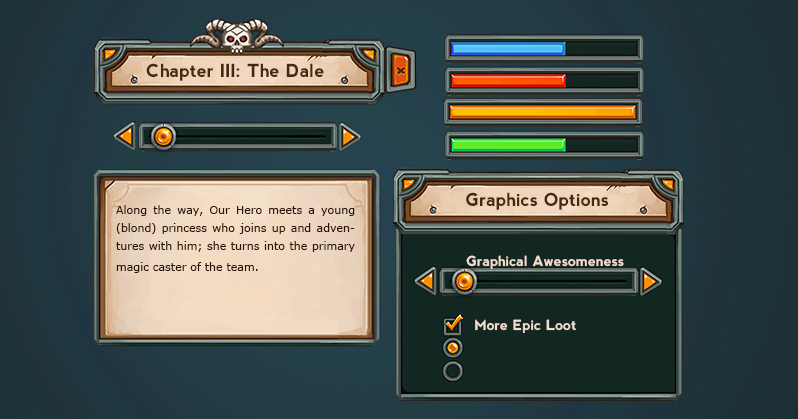
<style>
.page{position:relative;width:798px;height:419px}
.page>*{position:absolute;margin:0}
.t1{font:18px "nevis-Bold";color:#492811}
.t2{font:11px/18px "Verdana";color:#271406}
.t3{font:14px "nevis-Bold";color:#f2ddcc}
</style>
<div class="page">
<p class="t1" style="left:146px;top:63px;width:178px;height:18px">Chapter III: The Dale</p>
<p class="t1" style="left:466px;top:192px;width:142px;height:18px">Graphics Options</p>
<p class="t2" style="left:116px;top:205px;width:239px;height:68px;text-align:justify">Along the way, Our Hero meets a young (blond) princess who joins up and adventures with him; she turns into the primary magic caster of the team.</p>
<p class="t3" style="left:466px;top:255px;width:158px;height:14px">Graphical Awesomeness</p>
<p class="t3" style="left:475px;top:319px;width:101px;height:14px">More Epic Loot</p>
</div>
